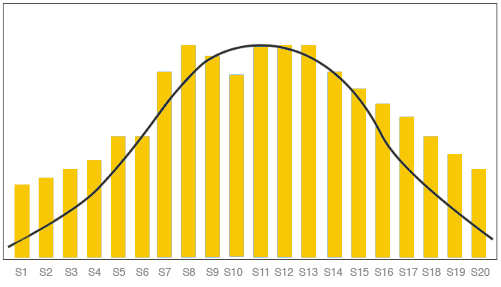
<style>
.page{position:relative;width:501px;height:287px;background:#ffffff}
.page>*{position:absolute;margin:0}
.t1{font:10.7px "Helvetica";color:#8e8e8e}
</style>
<div class="page">
<p class="t1" style="left:15px;top:268px;width:11px;height:8px">S1</p>
<p class="t1" style="left:39px;top:268px;width:14px;height:8px">S2</p>
<p class="t1" style="left:65px;top:268px;width:13px;height:8px">S3</p>
<p class="t1" style="left:88px;top:268px;width:13px;height:8px">S4</p>
<p class="t1" style="left:113px;top:268px;width:13px;height:8px">S5</p>
<p class="t1" style="left:136px;top:268px;width:13px;height:8px">S6</p>
<p class="t1" style="left:158px;top:268px;width:13px;height:8px">S7</p>
<p class="t1" style="left:183px;top:268px;width:13px;height:8px">S8</p>
<p class="t1" style="left:206px;top:268px;width:13px;height:8px">S9</p>
<p class="t1" style="left:224px;top:268px;width:19px;height:8px">S10</p>
<p class="t1" style="left:252px;top:268px;width:17px;height:8px">S11</p>
<p class="t1" style="left:275px;top:268px;width:19px;height:8px">S12</p>
<p class="t1" style="left:299px;top:268px;width:19px;height:8px">S13</p>
<p class="t1" style="left:324px;top:268px;width:19px;height:8px">S14</p>
<p class="t1" style="left:350px;top:268px;width:19px;height:8px">S15</p>
<p class="t1" style="left:375px;top:268px;width:19px;height:8px">S16</p>
<p class="t1" style="left:399px;top:268px;width:19px;height:8px">S17</p>
<p class="t1" style="left:422px;top:268px;width:19px;height:8px">S18</p>
<p class="t1" style="left:447px;top:268px;width:18px;height:8px">S19</p>
<p class="t1" style="left:471px;top:268px;width:19px;height:8px">S20</p>
</div>
